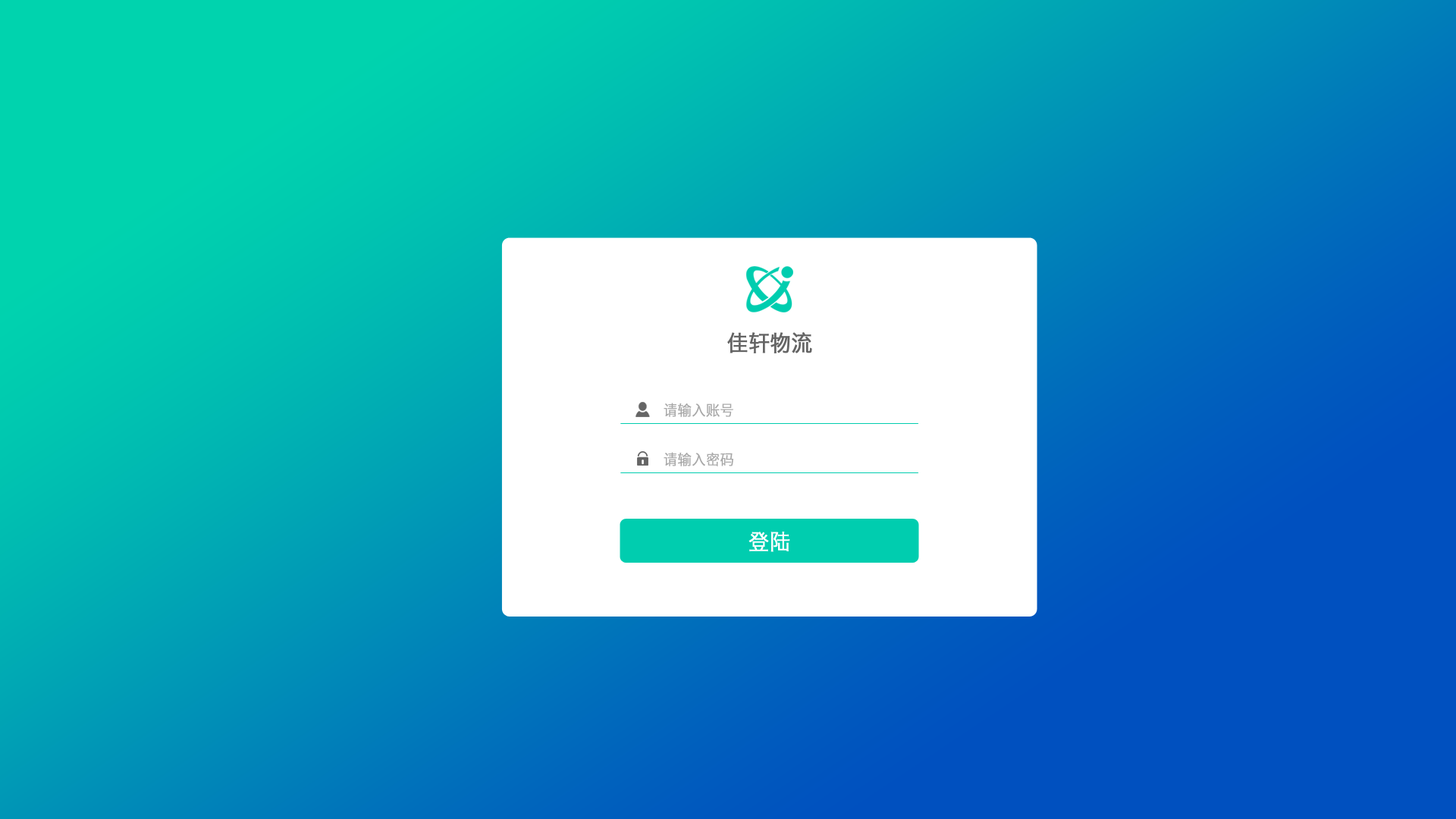
<style>
.page{position:relative;width:1456px;height:819px}
.page>*{position:absolute;margin:0}
.t1{font:22.1px "HiraginoSansGB-W3";color:#656565;font-weight:bold;scale:0.94 1}
.t2{font:14.7px "HiraginoSansGB-W3";color:#a8a8a8;font-weight:bold;scale:0.94 1}
.t3{font:22.1px "HiraginoSansGB-W3";color:#ffffff;font-weight:bold;scale:0.94 1}
</style>
<div class="page">
<p class="t1" style="left:727px;top:332px;width:85px;height:21px">佳轩物流</p>
<p class="t2" style="left:664px;top:403px;width:69px;height:14px">请输入账号</p>
<p class="t2" style="left:664px;top:452px;width:69px;height:14px">请输入密码</p>
<p class="t3" style="left:748px;top:532px;width:42px;height:20px">登陆</p>
</div>
